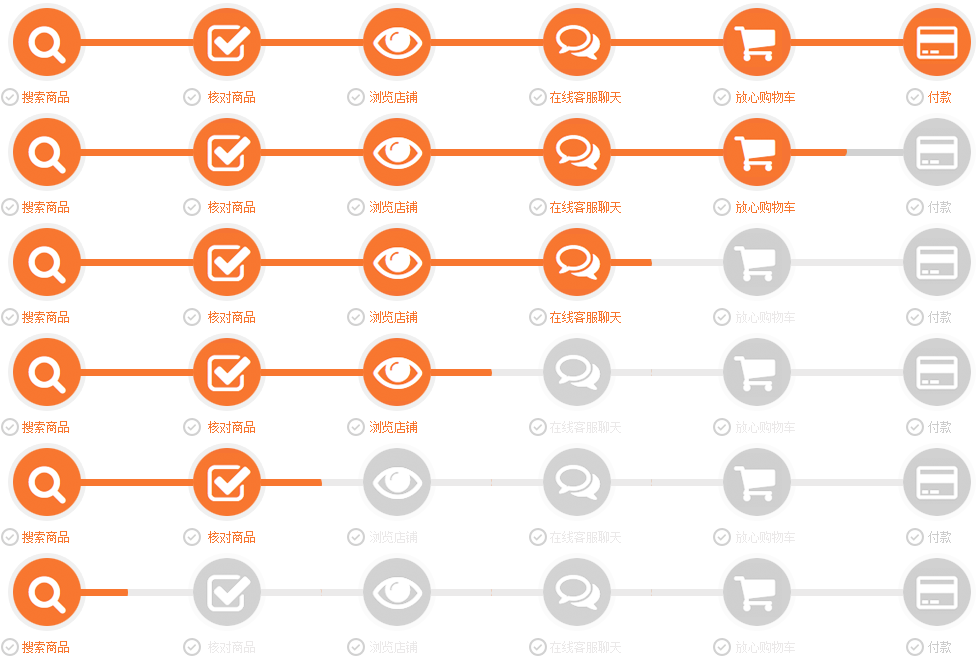
<style>
.page{position:relative;width:980px;height:660px;background:#ffffff}
.page>*{position:absolute;margin:0}
.t1{font:12px "SimSun";color:#f7762f}
.t2{font:12px "SimSun";color:#cccccc}
.t3{font:12px "SimSun";color:#ebe9e9}
</style>
<div class="page">
<p class="t1" style="left:22px;top:91px;width:929px;height:12px">搜索商品          核对商品           浏览店铺       在线客服聊天                   放心购物车       付款</p>
<p class="t1" style="left:22px;top:201px;width:929px;height:12px">搜索商品          核对商品           浏览店铺       在线客服聊天                   放心购物车       <span class="t2">付款</span></p>
<p class="t1" style="left:22px;top:311px;width:929px;height:12px">搜索商品          核对商品           浏览店铺       在线客服聊天                   <span class="t3">放心购物车       </span><span class="t2">付款</span></p>
<p class="t1" style="left:22px;top:421px;width:929px;height:12px">搜索商品          核对商品           浏览店铺       <span class="t3">在线客服聊天                   放心购物车       </span><span class="t2">付款</span></p>
<p class="t3" style="left:22px;top:531px;width:929px;height:12px"><span class="t1">搜索商品          核对商品           </span>浏览店铺       在线客服聊天                   放心购物车       <span class="t2">付款</span></p>
<p class="t3" style="left:22px;top:641px;width:929px;height:12px"><span class="t1">搜索商品          </span>核对商品           浏览店铺       在线客服聊天                   放心购物车       <span class="t2">付款</span></p>
</div>
